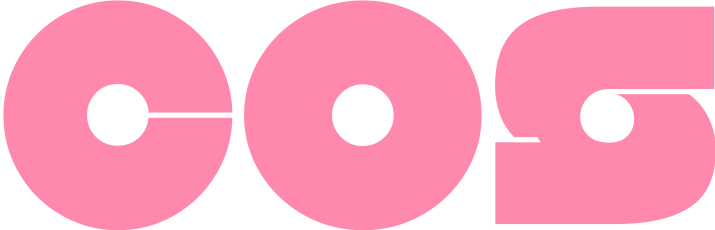
<style>
.page{position:relative;width:715px;height:230px;background:#ff89ad}
.page>*{position:absolute;margin:0}
.t1{font:310.5px "Null-Normal";letter-spacing:0.02em;color:#ff89ad}
</style>
<div class="page">
<p class="t1" style="left:3px;top:0px;width:713px;height:231px">COS</p>
</div>
